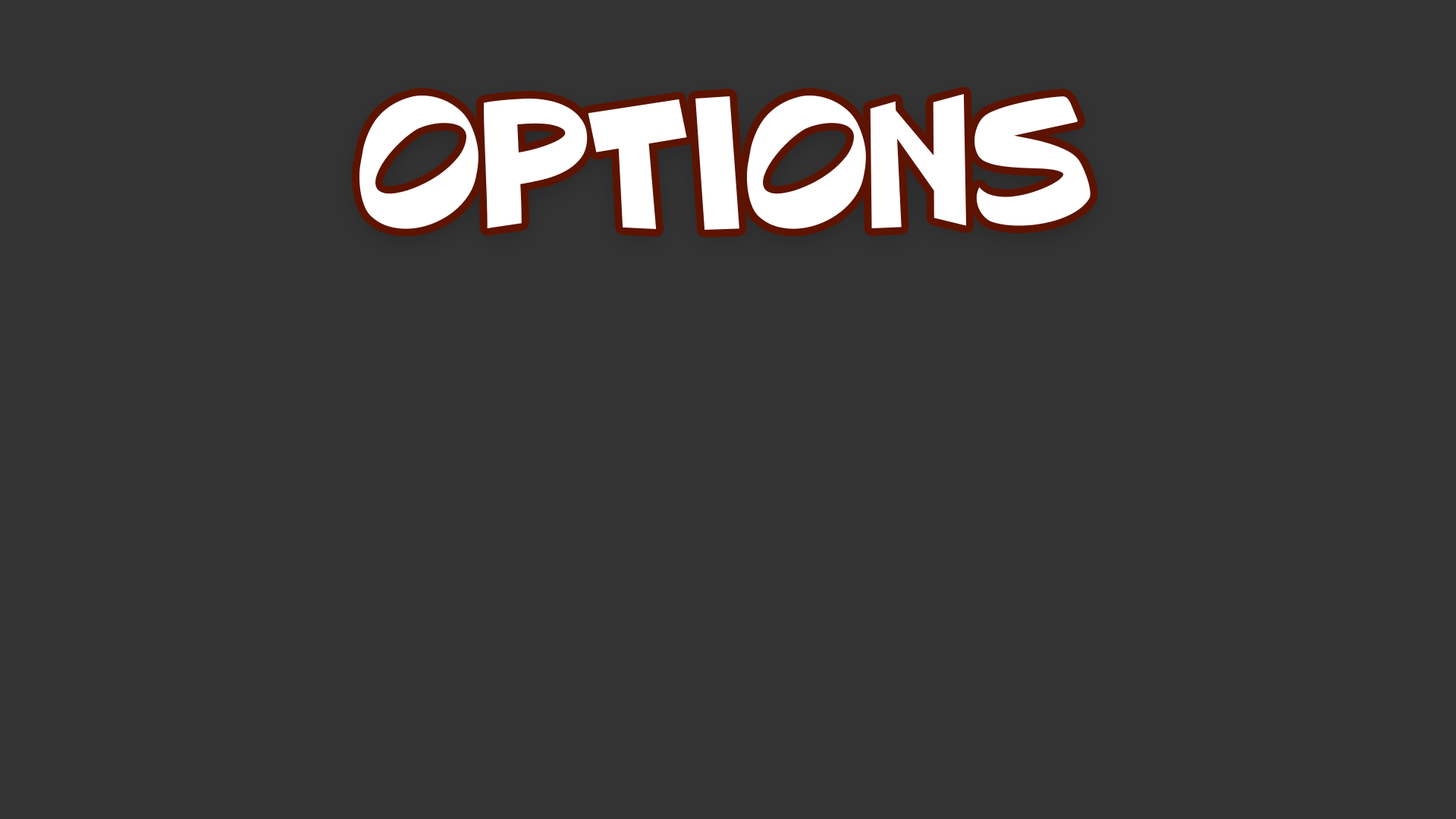
<style>
.page{position:relative;width:1456px;height:819px;background:#333333}
.page>*{position:absolute;margin:0}
.t1{font:203.6px "BLOCKHEADDUDEPersonalUse";color:#ffffff;scale:0.83 1}
</style>
<div class="page">
<p class="t1" style="left:359px;top:94px;width:731px;height:136px">Options</p>
</div>
